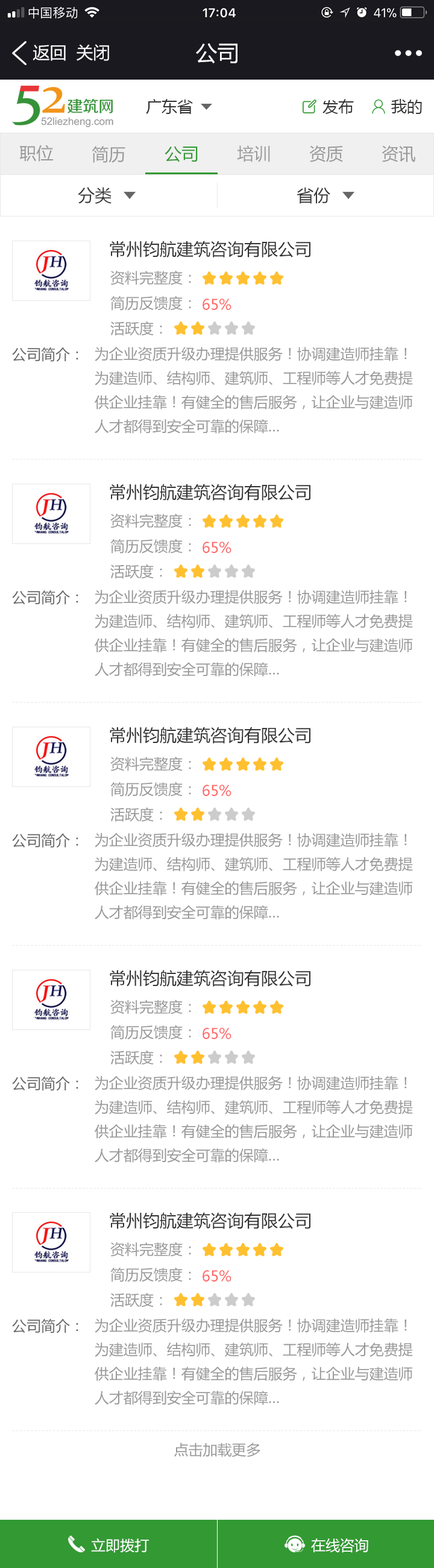
<style>
.page{position:relative;width:434px;height:1568px;background:#ffffff}
.page>*{position:absolute;margin:0}
.t1{font:16.9px "MicrosoftYaHei";color:#ffffff}
.t2{font:21.7px "MicrosoftYaHei";color:#ffffff}
.t3{font:15.7px "MicrosoftYaHei";color:#333333}
.t4{font:16.9px "MicrosoftYaHei";color:#999999}
.t5{font:16.9px "MicrosoftYaHei";color:#339933}
.t6{font:16.9px "MicrosoftYaHei";color:#333333}
.t7{font:14.5px "MicrosoftYaHei";color:#999999}
.t8{font:14.5px "MicrosoftYaHei";color:#ff6666}
.t9{font:14.5px "MicrosoftYaHei";color:#666666}
.t10{font:14.5px/24.1px "MicrosoftYaHei";color:#999999}
.t11{font:14.5px "MicrosoftYaHei";color:#ffffff}
</style>
<div class="page">
<p class="t1" style="left:33px;top:45px;width:33px;height:16px">返回</p>
<p class="t1" style="left:77px;top:44px;width:32px;height:17px">关闭</p>
<p class="t2" style="left:196px;top:43px;width:42px;height:20px">公司</p>
<p class="t3" style="left:146px;top:99px;width:47px;height:15px">广东省</p>
<p class="t3" style="left:323px;top:99px;width:31px;height:15px">发布</p>
<p class="t3" style="left:391px;top:99px;width:31px;height:15px">我的</p>
<p class="t4" style="left:19px;top:145px;width:34px;height:17px">职位</p>
<p class="t4" style="left:92px;top:146px;width:33px;height:17px">简历</p>
<p class="t5" style="left:165px;top:146px;width:33px;height:16px">公司</p>
<p class="t4" style="left:237px;top:145px;width:33px;height:17px">培训</p>
<p class="t4" style="left:309px;top:145px;width:34px;height:17px">资质</p>
<p class="t4" style="left:382px;top:145px;width:34px;height:17px">资讯</p>
<p class="t6" style="left:78px;top:187px;width:34px;height:17px">分类</p>
<p class="t6" style="left:297px;top:187px;width:33px;height:17px">省份</p>
<p class="t6" style="left:110px;top:241px;width:201px;height:17px">常州钧航建筑咨询有限公司</p>
<p class="t7" style="left:110px;top:270px;width:81px;height:66px">资料完整度：<br>简历反馈度：<br>活跃度：</p>
<p class="t8" style="left:203px;top:299px;width:29px;height:11px">65%</p>
<p class="t9" style="left:12px;top:347px;width:66px;height:15px">公司简介：</p>
<p class="t10" style="left:95px;top:347px;width:318px;height:87px">为企业资质升级办理提供服务！协调建造师挂靠！为建造师、结构师、建筑师、工程师等人才免费提供企业挂靠！有健全的售后服务，让企业与建造师人才都得到安全可靠的保障…</p>
<p class="t6" style="left:110px;top:484px;width:201px;height:17px">常州钧航建筑咨询有限公司</p>
<p class="t7" style="left:110px;top:513px;width:81px;height:66px">资料完整度：<br>简历反馈度：<br>活跃度：</p>
<p class="t8" style="left:203px;top:542px;width:29px;height:11px">65%</p>
<p class="t9" style="left:12px;top:590px;width:66px;height:15px">公司简介：</p>
<p class="t10" style="left:95px;top:590px;width:318px;height:87px">为企业资质升级办理提供服务！协调建造师挂靠！为建造师、结构师、建筑师、工程师等人才免费提供企业挂靠！有健全的售后服务，让企业与建造师人才都得到安全可靠的保障…</p>
<p class="t6" style="left:110px;top:727px;width:201px;height:17px">常州钧航建筑咨询有限公司</p>
<p class="t7" style="left:110px;top:756px;width:81px;height:66px">资料完整度：<br>简历反馈度：<br>活跃度：</p>
<p class="t8" style="left:203px;top:785px;width:29px;height:11px">65%</p>
<p class="t9" style="left:12px;top:833px;width:66px;height:15px">公司简介：</p>
<p class="t10" style="left:95px;top:833px;width:318px;height:87px">为企业资质升级办理提供服务！协调建造师挂靠！为建造师、结构师、建筑师、工程师等人才免费提供企业挂靠！有健全的售后服务，让企业与建造师人才都得到安全可靠的保障…</p>
<p class="t6" style="left:110px;top:970px;width:201px;height:17px">常州钧航建筑咨询有限公司</p>
<p class="t7" style="left:110px;top:999px;width:81px;height:66px">资料完整度：<br>简历反馈度：<br>活跃度：</p>
<p class="t8" style="left:203px;top:1028px;width:29px;height:11px">65%</p>
<p class="t9" style="left:12px;top:1076px;width:66px;height:15px">公司简介：</p>
<p class="t10" style="left:95px;top:1076px;width:318px;height:87px">为企业资质升级办理提供服务！协调建造师挂靠！为建造师、结构师、建筑师、工程师等人才免费提供企业挂靠！有健全的售后服务，让企业与建造师人才都得到安全可靠的保障…</p>
<p class="t6" style="left:110px;top:1212px;width:201px;height:17px">常州钧航建筑咨询有限公司</p>
<p class="t7" style="left:110px;top:1242px;width:81px;height:65px">资料完整度：<br>简历反馈度：<br>活跃度：</p>
<p class="t8" style="left:203px;top:1270px;width:29px;height:12px">65%</p>
<p class="t9" style="left:12px;top:1319px;width:66px;height:14px">公司简介：</p>
<p class="t10" style="left:95px;top:1318px;width:318px;height:87px">为企业资质升级办理提供服务！协调建造师挂靠！为建造师、结构师、建筑师、工程师等人才免费提供企业挂靠！有健全的售后服务，让企业与建造师人才都得到安全可靠的保障…</p>
<p class="t7" style="left:174px;top:1443px;width:86px;height:14px">点击加载更多</p>
<p class="t11" style="left:91px;top:1538px;width:58px;height:15px">立即拨打</p>
<p class="t11" style="left:311px;top:1538px;width:57px;height:15px">在线咨询</p>
</div>
